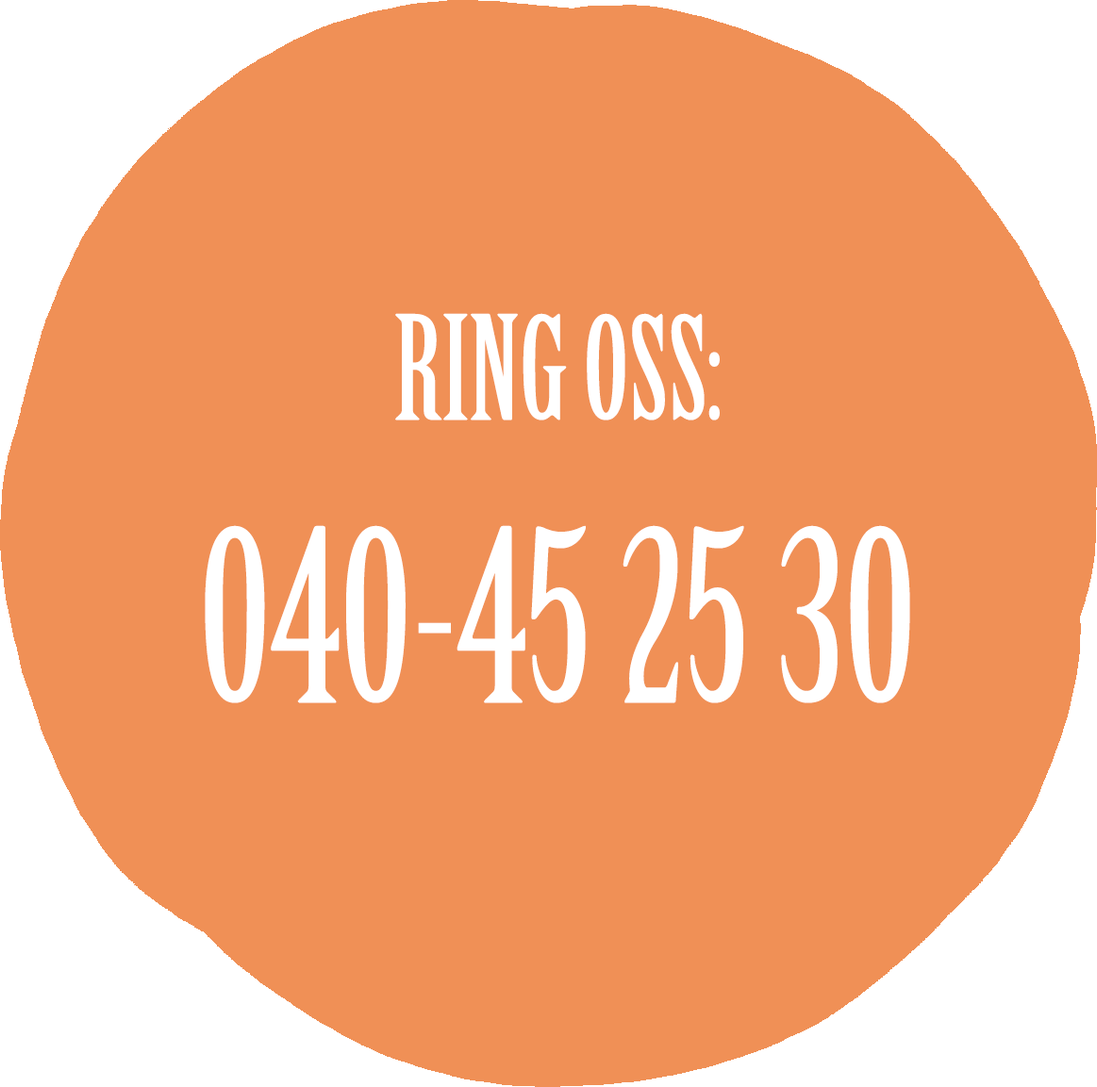
<style>
.page{position:relative;width:1097px;height:1087px;background:#f09056}
.page>*{position:absolute;margin:0}
.t1{font:235.8px "BirchStd";color:#ffffff}
.t2{font:141.5px "BirchStd";color:#ffffff}
</style>
<div class="page">
<p class="t1" style="left:205px;top:313px;width:705px;height:390px;text-align:center"><span class="t2">RING OSS:<br></span>040-45 25 30</p>
</div>
